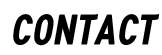
<style>
.page{position:relative;width:162px;height:55px;background:#ffffff}
.page>*{position:absolute;margin:0}
.t1{font:35px "RixMiniBusPR";color:#000000}
</style>
<div class="page">
<p class="t1" style="left:13px;top:14px;width:146px;height:32px">CONTACT</p>
</div>
